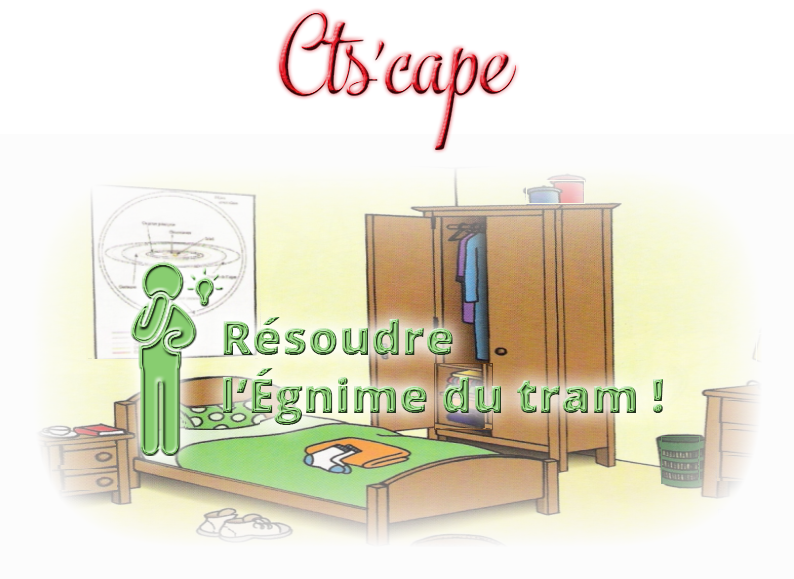
<style>
.page{position:relative;width:794px;height:579px;background:#ffffff}
.page>*{position:absolute;margin:0}
.t1{font:48px "OpenSans-ExtraBold"}
</style>
<div class="page">
<p class="t1" style="left:223px;top:317px;width:440px;height:108px">Résoudre <br>l’Égnime du tram !</p>
</div>
